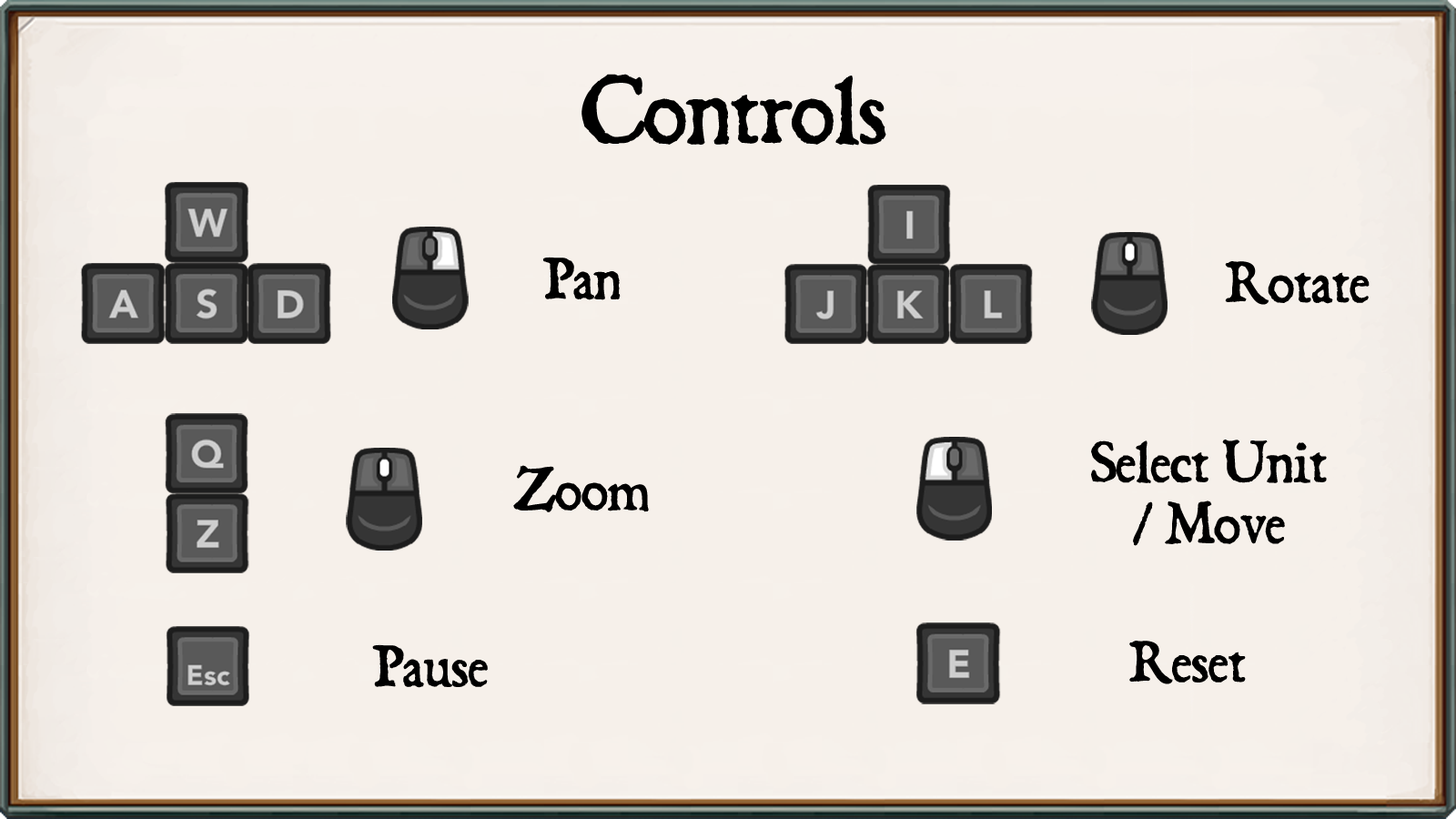
<style>
.page{position:relative;width:1456px;height:819px;background:#f6f0ea}
.page>*{position:absolute;margin:0}
.t1{font:83.7px "Dominican";color:#000000}
.t2{font:51px "Dominican";color:#000000}
</style>
<div class="page">
<p class="t1" style="left:581px;top:74px;width:305px;height:72px">Controls</p>
<p class="t2" style="left:542px;top:257px;width:79px;height:43px">Pan</p>
<p class="t2" style="left:1225px;top:261px;width:145px;height:44px">Rotate</p>
<p class="t2" style="left:1091px;top:440px;width:236px;height:106px;text-align:center">Select Unit<br>/ Move</p>
<p class="t2" style="left:513px;top:465px;width:136px;height:47px">Zoom</p>
<p class="t2" style="left:1129px;top:641px;width:117px;height:43px">Reset</p>
<p class="t2" style="left:372px;top:644px;width:116px;height:44px">Pause</p>
</div>
